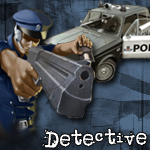
<style>
.page{position:relative;width:150px;height:150px}
.page>*{position:absolute;margin:0}
.t1{font:18px "junko-typewriter";color:#ffffff}
.t2{font:30px "junko-typewriter";color:#ffffff}
</style>
<div class="page">
<p class="t1" style="left:42px;top:128px;width:107px;height:20px;rotate:-1deg">Dete<span class="t2">c</span>tive</p>
</div>
